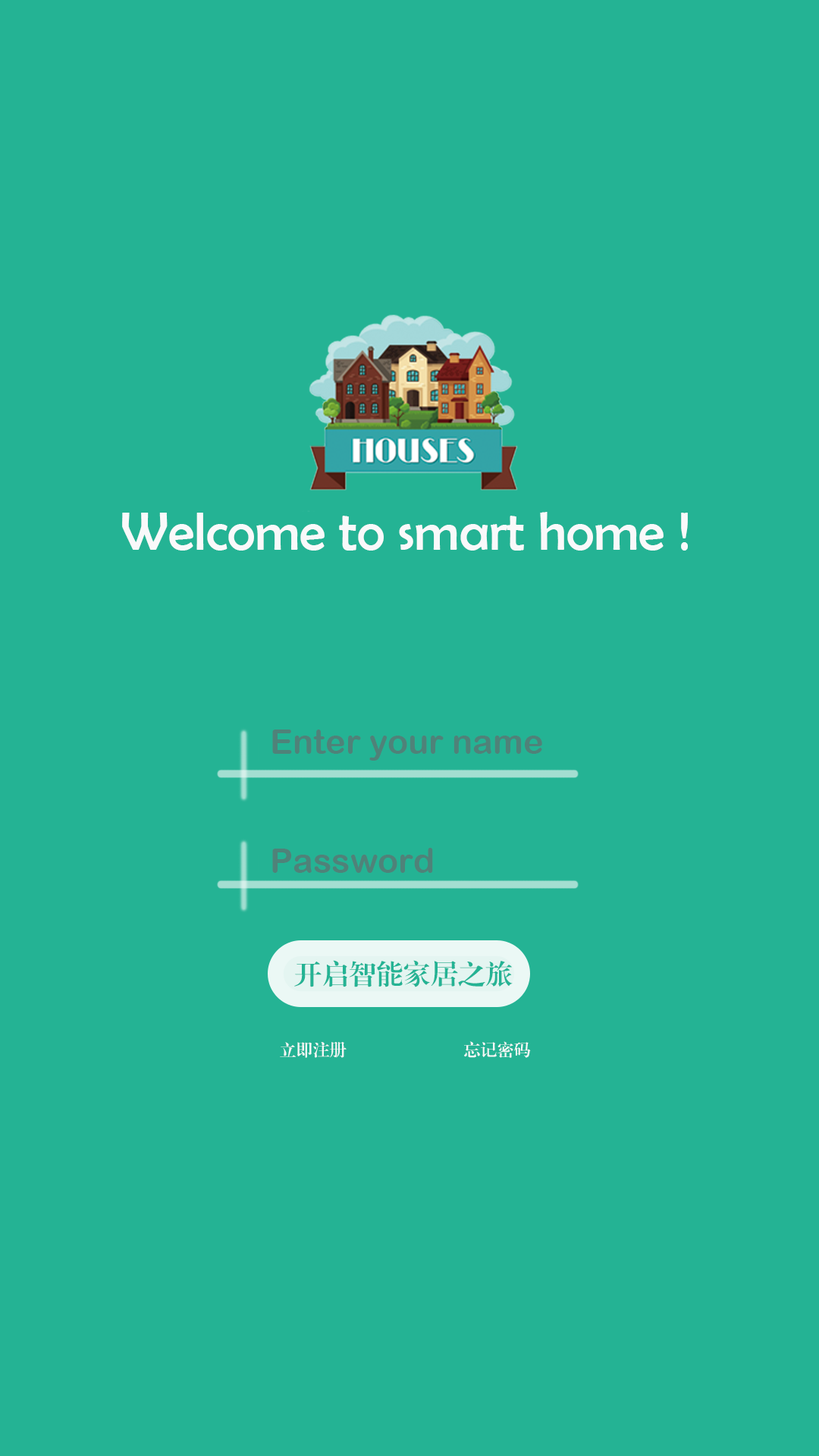
<style>
.page{position:relative;width:819px;height:1456px;background:#24b394}
.page>*{position:absolute;margin:0}
.t1{font:53.6px "BerlinSansFB-Reg";color:#f9f9fa}
.t2{font:34px "ArialRoundedMTBold";color:#4f8279}
.t3{font:27.3px "FZXBSJW--GB1-0";color:#24b394}
.t4{font:16.7px "FZXBSJW--GB1-0";color:#f4f8f7}
</style>
<div class="page">
<p class="t1" style="left:122px;top:512px;width:566px;height:39px">Welcome to smart home !</p>
<p class="t2" style="left:272px;top:730px;width:270px;height:143px">Enter your name<br><br>Password</p>
<p class="t3" style="left:294px;top:960px;width:219px;height:27px">开启智能家居之旅</p>
<p class="t4" style="left:280px;top:1041px;width:251px;height:17px">立即注册                            忘记密码</p>
</div>
